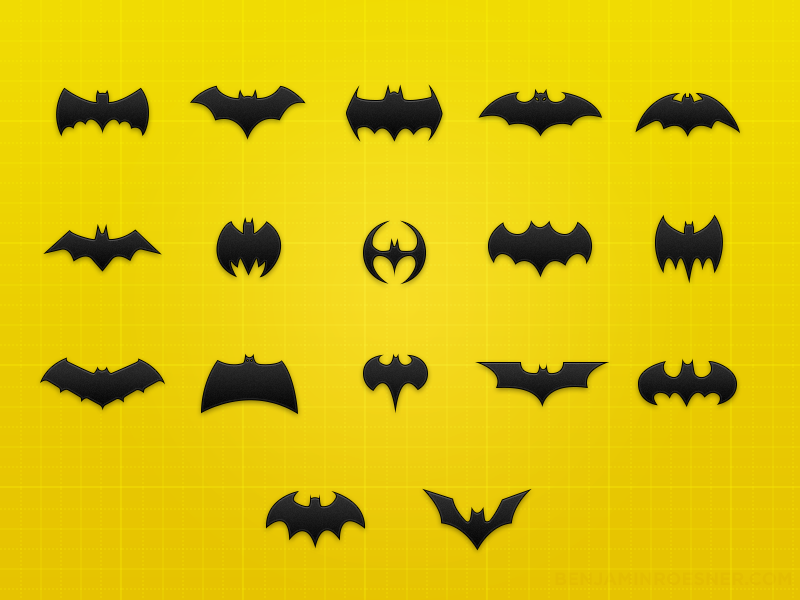
<style>
.page{position:relative;width:800px;height:600px}
.page>*{position:absolute;margin:0}
.t1{font:18px "Gotham-Bold";color:#e3bd01;text-transform:uppercase}
</style>
<div class="page">
<p class="t1" style="left:555px;top:572px;width:236px;height:14px">benjaminroesner.com</p>
</div>
